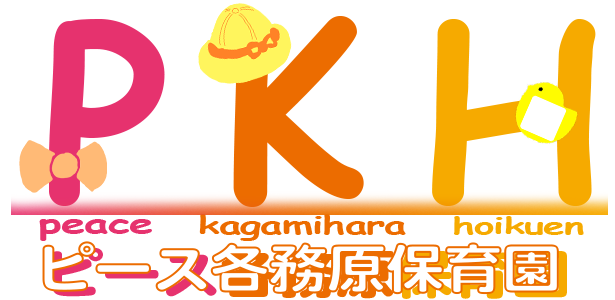
<style>
.page{position:relative;width:615px;height:300px;background:#ffffff}
.page>*{position:absolute;margin:0}
.t1{font:240px "ComicSansMS-Bold";letter-spacing:-0.02em;color:#ec6c00}
.t2{font:240px "ComicSansMS-Bold";letter-spacing:-0.02em;color:#e6326e}
.t3{font:240px "ComicSansMS-Bold";letter-spacing:-0.02em;color:#f6aa00}
.t4{font:27.8px "ComicSansMS-Bold";letter-spacing:-0.02em;color:#e6326e;scale:1.57 1}
.t5{font:25.1px "ComicSansMS-Bold";letter-spacing:-0.02em;color:#ec6c00;scale:1.59 1}
.t6{font:22.6px "ComicSansMS-Bold";letter-spacing:-0.02em;color:#f6aa00;scale:1.73 1}
.t7{font:52.4px "HeiseiMaruGoStd-W8";letter-spacing:-0.02em;color:#e6326e;scale:1.14 1}
.t8{font:52.4px "HeiseiMaruGoStd-W8";letter-spacing:-0.02em;color:#ec6c00;scale:1.14 1}
.t9{font:52.4px "HeiseiMaruGoStd-W8";letter-spacing:-0.02em;color:#f6aa00;scale:1.14 1}
</style>
<div class="page">
<p class="t1" style="left:233px;top:15px;width:131px;height:192px">K</p>
<p class="t2" style="left:49px;top:19px;width:116px;height:187px">P</p>
<p class="t3" style="left:432px;top:19px;width:164px;height:187px">H</p>
<p class="t4" style="left:39px;top:219px;width:113px;height:22px">peace</p>
<p class="t5" style="left:199px;top:214px;width:207px;height:27px">kagamihara</p>
<p class="t6" style="left:454px;top:216px;width:130px;height:19px">hoikuen</p>
<p class="t7" style="left:52px;top:248px;width:515px;height:51px">ピース<span class="t8">各務原</span><span class="t9">保育園</span></p>
</div>
